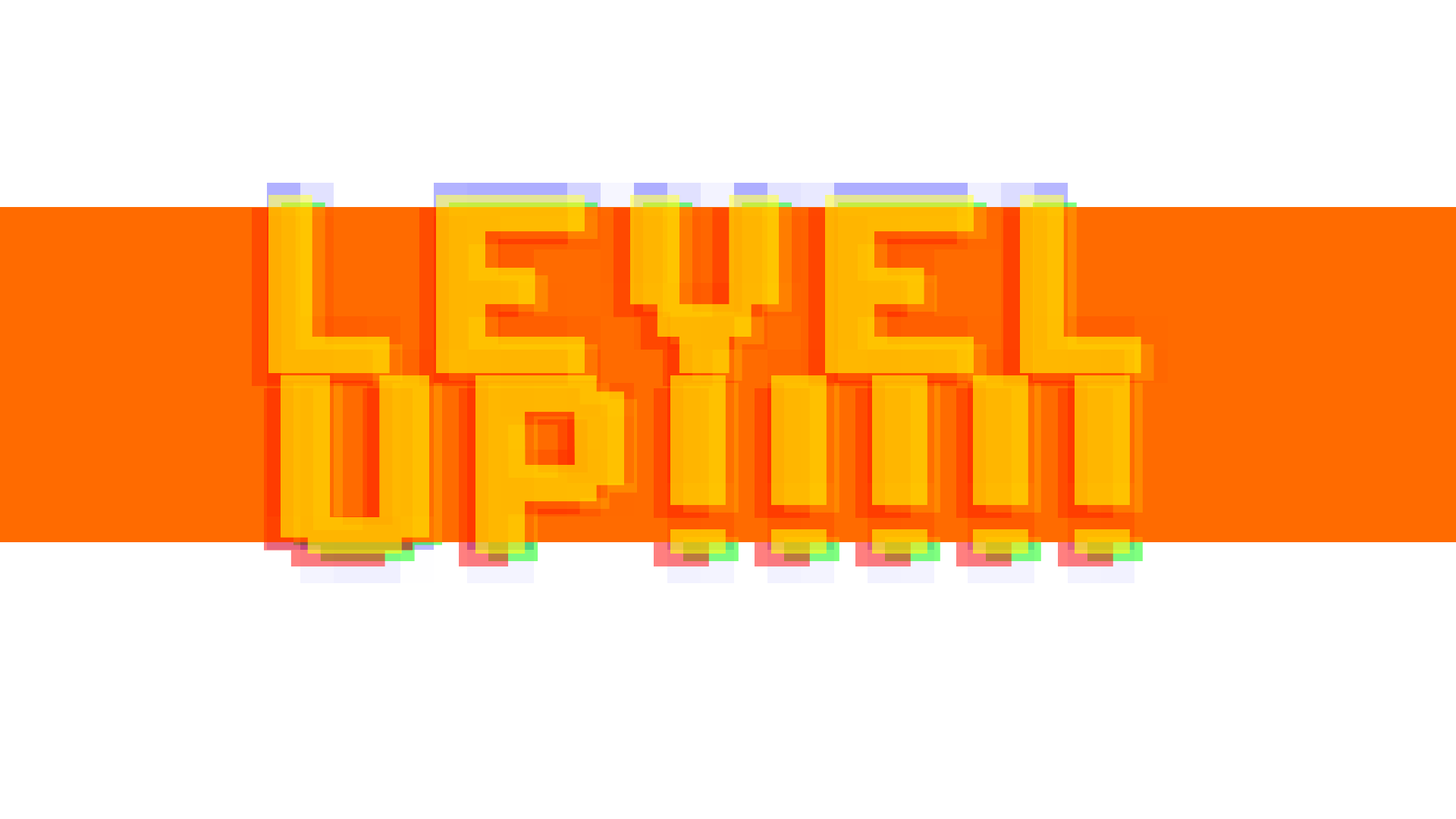
<style>
.page{position:relative;width:1456px;height:819px;background:#ffffff}
.page>*{position:absolute;margin:0}
.t1{font:270.2px/179.9px "Silom-Bold";color:#ffb700;scale:1.36 1}
</style>
<div class="page">
<p class="t1" style="left:268px;top:195px;width:873px;height:359px;text-align:center">LEVEL<br>UP!!!!!</p>
</div>
